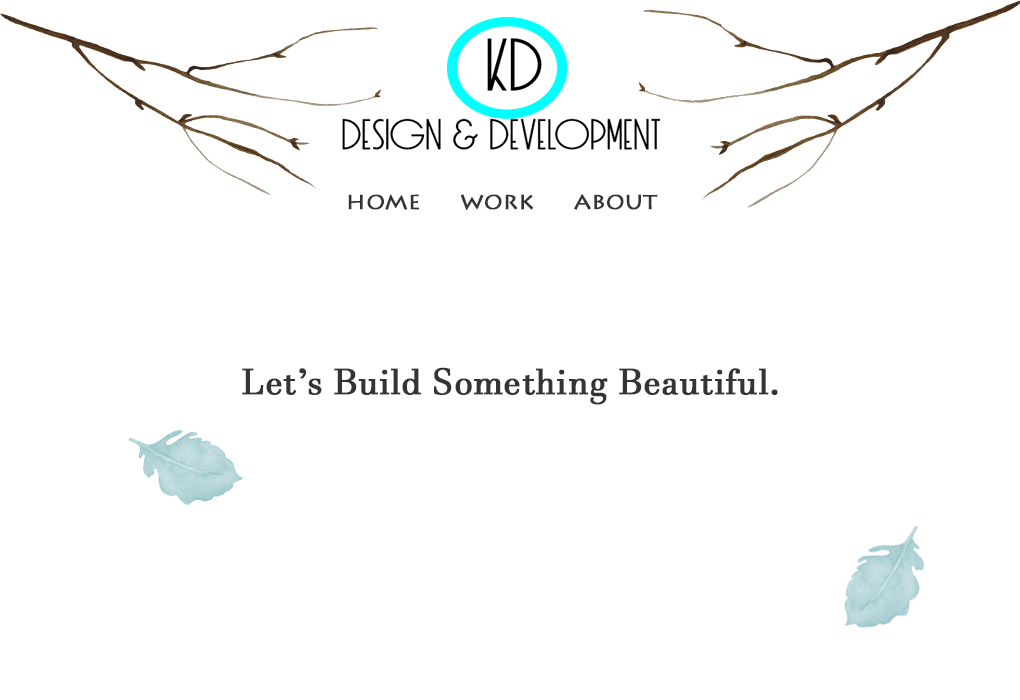
<style>
.page{position:relative;width:1020px;height:700px;background:#ffffff}
.page>*{position:absolute;margin:0}
.t1{font:24px "LithosPro-Regular";color:#333535;font-weight:bold}
.t2{font:36px "JavaneseText";color:#333535;font-weight:bold}
</style>
<div class="page">
<p class="t1" style="left:348px;top:194px;width:310px;height:16px">home     work     about</p>
<p class="t2" style="left:242px;top:367px;width:536px;height:38px">Let’s Build Something Beautiful.</p>
</div>
